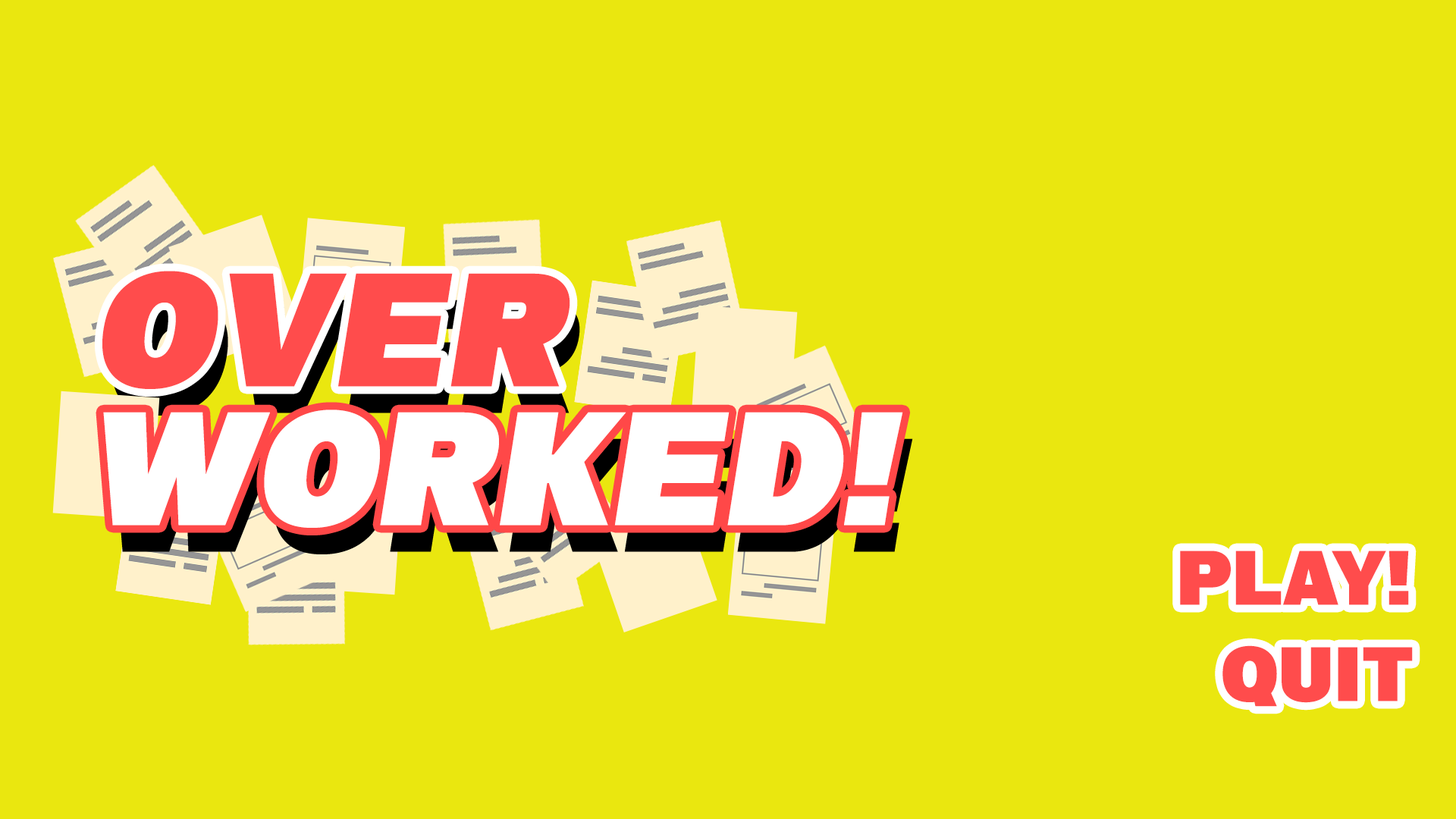
<style>
.page{position:relative;width:1456px;height:819px;background:#eae70f}
.page>*{position:absolute;margin:0}
.t1{font:151.7px "aBigDeal";color:#ff4c4c}
.t2{font:151.7px "aBigDeal";color:#ffffff}
.t3{font:71.6px "aBigDeal";color:#ff4c4c}
</style>
<div class="page">
<p class="t1" style="left:102px;top:271px;width:468px;height:118px">OVER</p>
<p class="t2" style="left:103px;top:409px;width:800px;height:119px">worked!</p>
<p class="t3" style="left:1180px;top:551px;width:229px;height:54px">play!</p>
<p class="t3" style="left:1222px;top:645px;width:191px;height:62px">quit</p>
</div>
